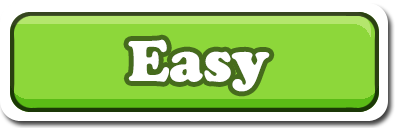
<style>
.page{position:relative;width:397px;height:128px;background:#8dd73a}
.page>*{position:absolute;margin:0}
.t1{font:60px "CooperBlack";color:#ffffff}
</style>
<div class="page">
<p class="t1" style="left:128px;top:39px;width:142px;height:53px">Easy</p>
</div>
